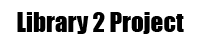
<style>
.page{position:relative;width:200px;height:50px;background:#ffffff}
.page>*{position:absolute;margin:0}
.t1{font:25px "Impact";color:#000000}
</style>
<div class="page">
<p class="t1" style="left:17px;top:12px;width:167px;height:22px">Library 2 Project</p>
</div>
